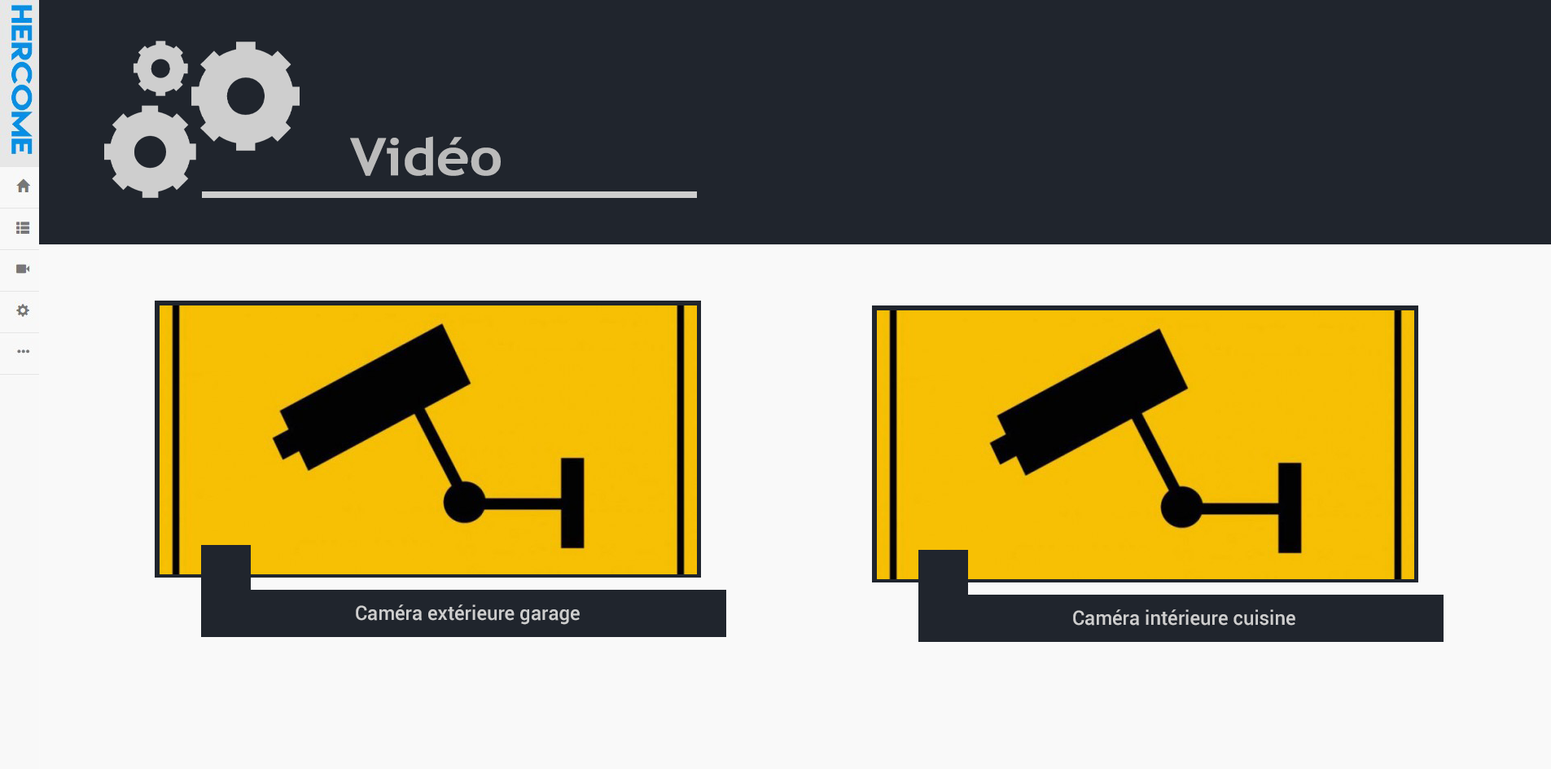
<style>
.page{position:relative;width:1551px;height:769px;background:#f9f9f9}
.page>*{position:absolute;margin:0}
.t1{font:51.5px "TrebuchetMS-Bold";color:#bbbbbb;scale:1.13 1}
.t2{font:19.5px "Roboto-Medium";color:#cecece}
</style>
<div class="page">
<p class="t1" style="left:350px;top:136px;width:151px;height:40px">Vidéo</p>
<p class="t2" style="left:356px;top:604px;width:224px;height:21px">Caméra extérieure garage</p>
<p class="t2" style="left:1073px;top:609px;width:223px;height:16px">Caméra intérieure cuisine</p>
</div>
